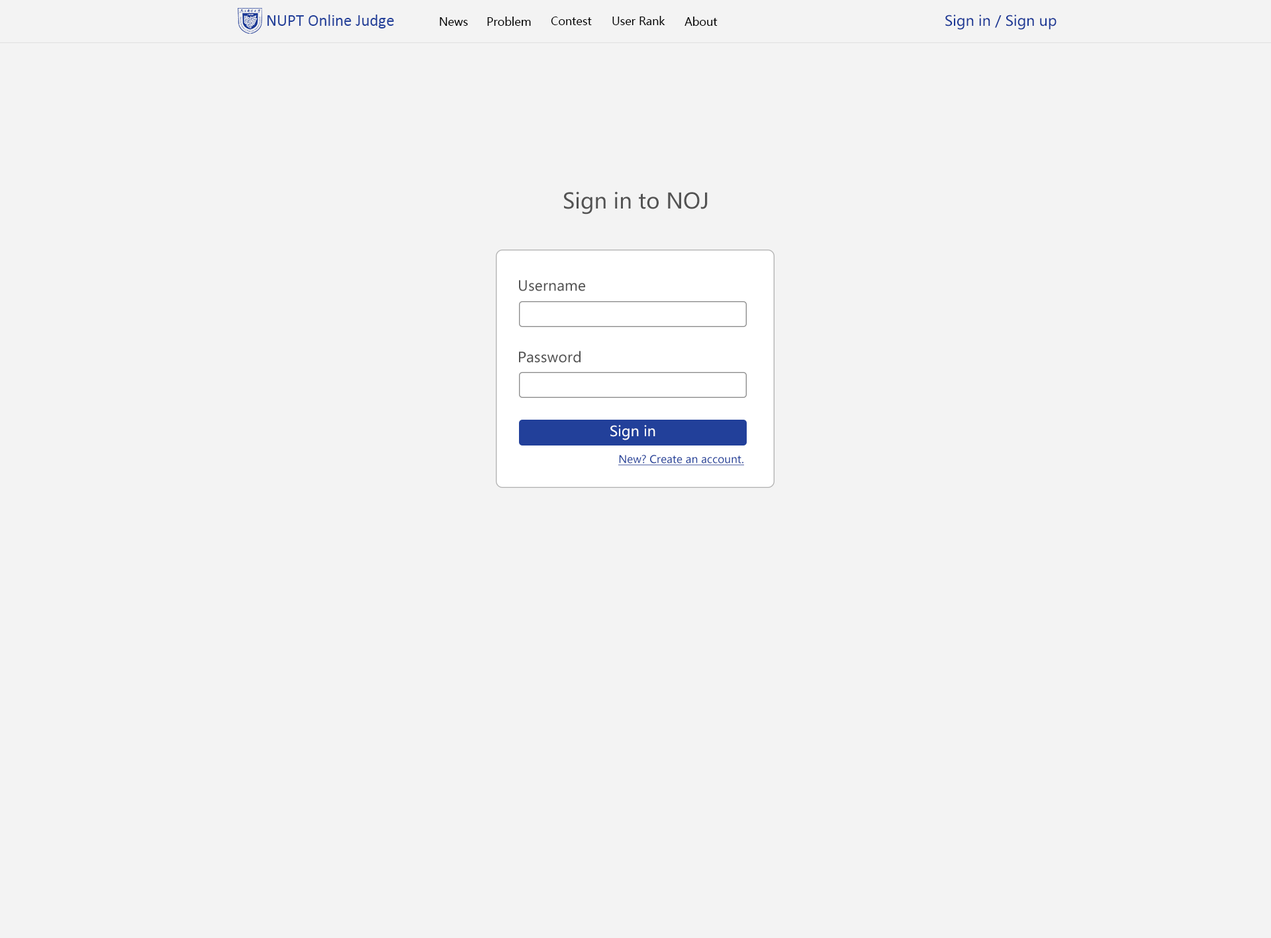
<style>
.page{position:relative;width:1271px;height:938px;background:#f3f3f3}
.page>*{position:absolute;margin:0}
.t1{font:16.6px "Calibri";color:#22409a}
.t2{font:11px "MicrosoftYaHei";color:#000000}
.t3{font:14.1px "MicrosoftYaHei";color:#1a3795}
.t4{font:21.2px "MicrosoftYaHei";color:#535353}
.t5{font:14.1px "MicrosoftYaHei";color:#535353}
.t6{font:14.1px "MicrosoftYaHei";color:#ffffff}
.t7{font:10.6px "MicrosoftYaHei";color:#22409a;text-decoration:underline}
</style>
<div class="page">
<p class="t1" style="left:267px;top:15px;width:127px;height:13px">NUPT Online Judge</p>
<p class="t2" style="left:440px;top:17px;width:28px;height:9px">News</p>
<p class="t2" style="left:487px;top:17px;width:44px;height:9px">Problem</p>
<p class="t2" style="left:551px;top:17px;width:41px;height:8px">Contest</p>
<p class="t2" style="left:612px;top:16px;width:53px;height:9px">User Rank</p>
<p class="t2" style="left:685px;top:17px;width:33px;height:9px">About</p>
<p class="t3" style="left:945px;top:15px;width:112px;height:15px">Sign in / Sign up</p>
<p class="t4" style="left:564px;top:191px;width:144px;height:23px">Sign in to NOJ</p>
<p class="t5" style="left:519px;top:280px;width:66px;height:11px">Username</p>
<p class="t5" style="left:519px;top:351px;width:62px;height:12px">Password</p>
<p class="t6" style="left:610px;top:425px;width:45px;height:15px">Sign in</p>
<p class="t7" style="left:618px;top:455px;width:126px;height:10px">New? Create an account.</p>
</div>
